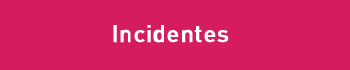
<style>
.page{position:relative;width:350px;height:70px;background:#d51c5e}
.page>*{position:absolute;margin:0}
.t1{font:24px "DINPro-Medium";color:#ffffff;font-weight:bold}
</style>
<div class="page">
<p class="t1" style="left:113px;top:25px;width:116px;height:18px">Incidentes</p>
</div>
